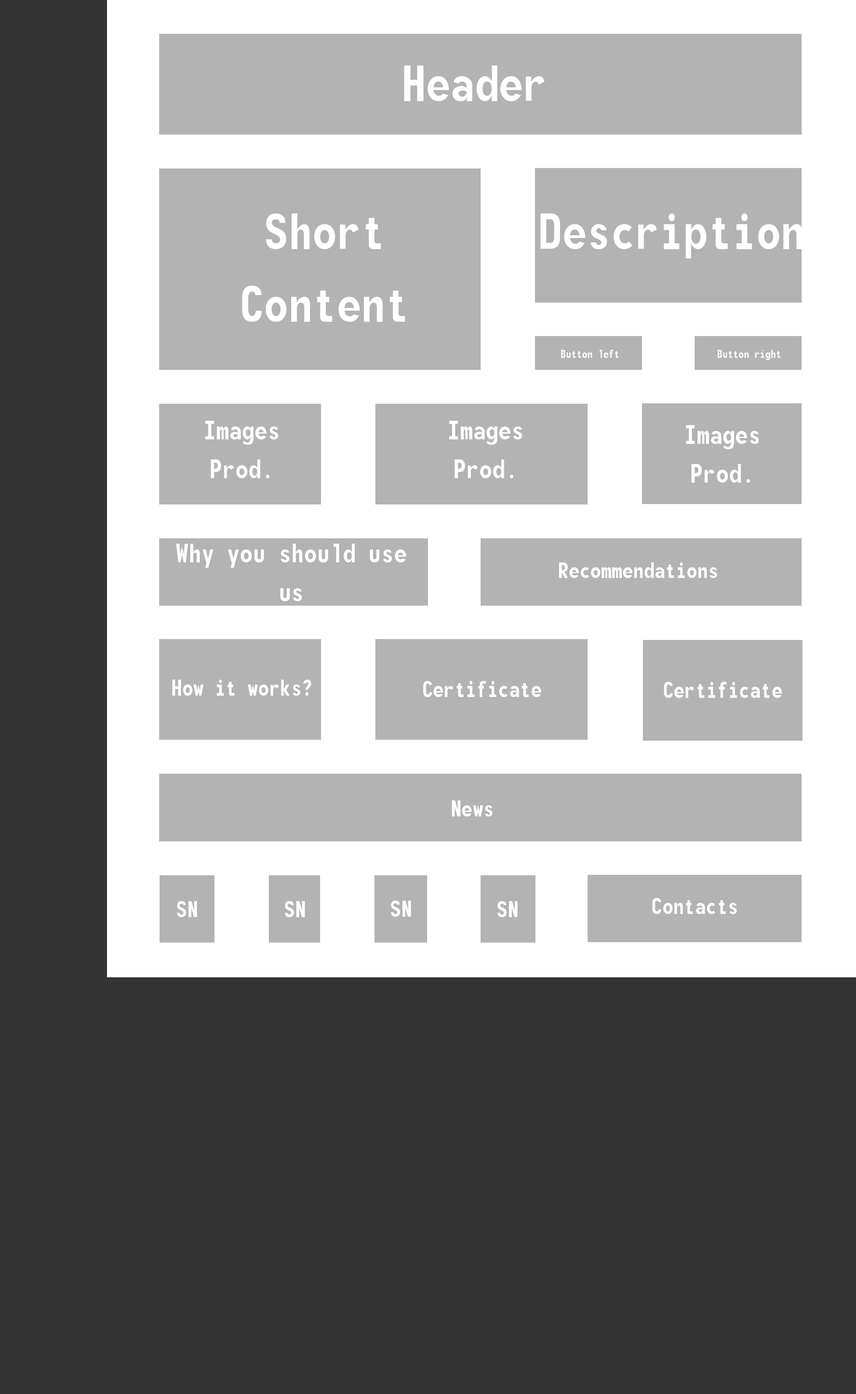
<style>
.page{position:relative;width:856px;height:1394px;background:#333333}
.page>*{position:absolute;margin:0}
.t1{font:60.6px "Monofonto";color:#ffffff}
.t2{font:13.4px "Monofonto";color:#ffffff}
.t3{font:32.1px "Monofonto";color:#ffffff}
.t4{font:26.7px "Monofonto";color:#ffffff}
.t5{font:27.2px "Monofonto";color:#ffffff}
</style>
<div class="page">
<p class="t1" style="left:404px;top:66px;width:140px;height:35px">Header</p>
<p class="t1" style="left:242px;top:213px;width:163px;height:109px;text-align:center">Short<br>Content</p>
<p class="t1" style="left:540px;top:213px;width:262px;height:45px">Description</p>
<p class="t2" style="left:561px;top:350px;width:57px;height:8px">Button left</p>
<p class="t2" style="left:717px;top:350px;width:63px;height:10px">Button right</p>
<p class="t3" style="left:205px;top:421px;width:73px;height:57px;text-align:center">Images<br>Prod.</p>
<p class="t3" style="left:449px;top:421px;width:73px;height:57px;text-align:center">Images<br>Prod.</p>
<p class="t3" style="left:685px;top:425px;width:73px;height:58px;text-align:center">Images<br>Prod.</p>
<p class="t3" style="left:176px;top:544px;width:230px;height:57px;text-align:center">Why you should use<br>us</p>
<p class="t4" style="left:559px;top:562px;width:158px;height:16px">Recommendations</p>
<p class="t5" style="left:172px;top:680px;width:139px;height:16px">How it works?</p>
<p class="t5" style="left:423px;top:681px;width:118px;height:16px">Certificate</p>
<p class="t5" style="left:663px;top:682px;width:119px;height:16px">Certificate</p>
<p class="t5" style="left:451px;top:800px;width:41px;height:16px">News</p>
<p class="t5" style="left:177px;top:901px;width:20px;height:16px">SN</p>
<p class="t5" style="left:285px;top:901px;width:20px;height:16px">SN</p>
<p class="t5" style="left:391px;top:901px;width:20px;height:16px">SN</p>
<p class="t5" style="left:497px;top:901px;width:20px;height:16px">SN</p>
<p class="t5" style="left:652px;top:898px;width:85px;height:16px">Contacts</p>
</div>
